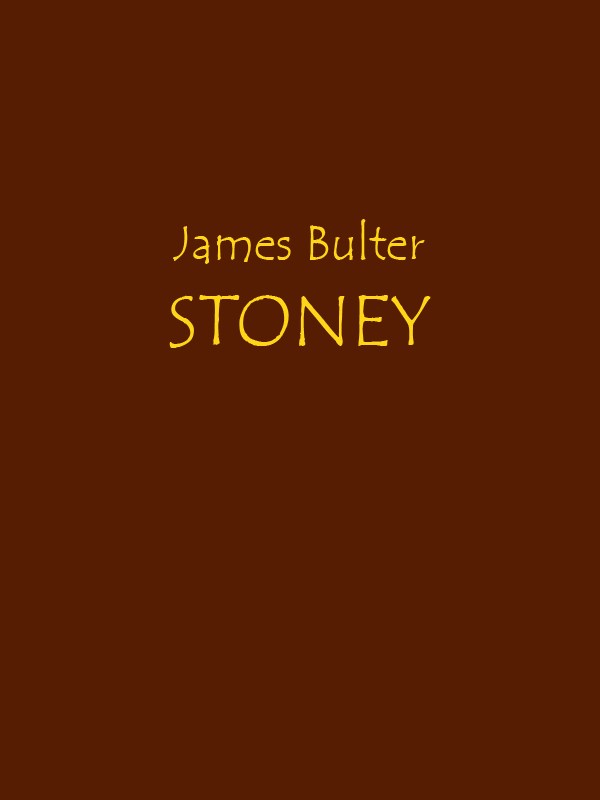
<style>
.page{position:relative;width:600px;height:800px;background:#561d03}
.page>*{position:absolute;margin:0}
.t1{font:48px "TempusSansITC";color:#ffd617}
.t2{font:72px "TempusSansITC";color:#ffd617}
</style>
<div class="page">
<p class="t1" style="left:169px;top:219px;width:262px;height:129px;text-align:center">James Bulter<br><span class="t2">STONEY</span></p>
</div>
